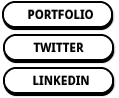
<style>
.page{position:relative;width:119px;height:98px;background:#ffffff}
.page>*{position:absolute;margin:0}
.t1{font:12px "DroidSans-Bold";color:#000000}
</style>
<div class="page">
<p class="t1" style="left:28px;top:10px;width:65px;height:9px">PORTFOLIO</p>
<p class="t1" style="left:33px;top:43px;width:51px;height:9px">TWITTER</p>
<p class="t1" style="left:33px;top:76px;width:56px;height:9px">LINKEDIN</p>
</div>
